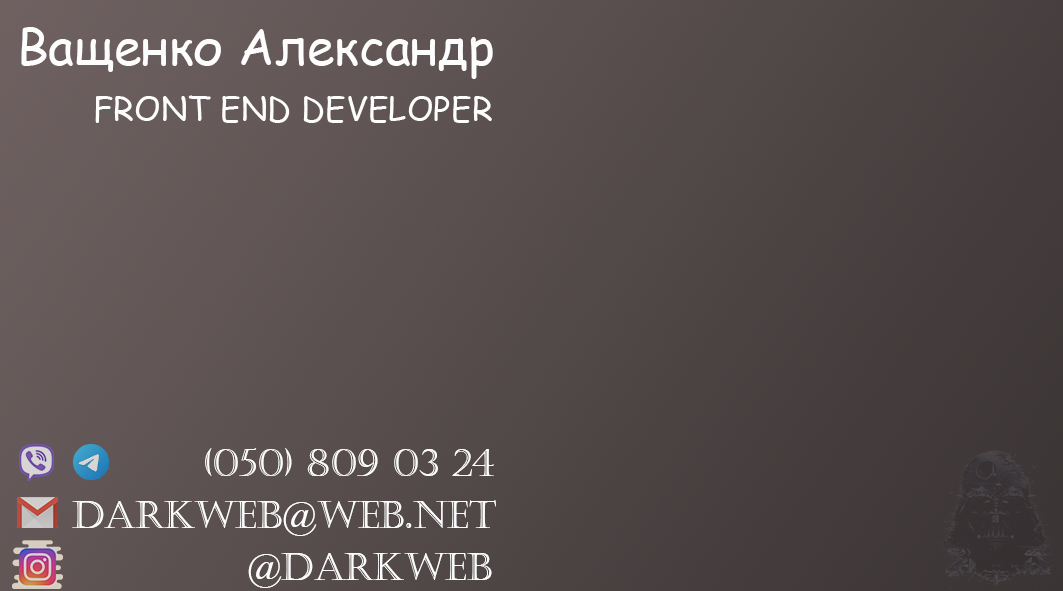
<style>
.page{position:relative;width:1063px;height:591px}
.page>*{position:absolute;margin:0}
.t1{font:50px "ComicSansMS";color:#fdfdfd}
.t2{font:33.3px "ComicSansMS";color:#fdfdfd}
.t3{font:37.5px "Castellar";color:#fdfdfd}
</style>
<div class="page">
<p class="t1" style="left:21px;top:27px;width:472px;height:52px">Ващенко Александр</p>
<p class="t2" style="left:95px;top:95px;width:397px;height:28px">FRONT END DEVELOPER</p>
<p class="t3" style="left:205px;top:448px;width:289px;height:28px">(050) 809 03 24</p>
<p class="t3" style="left:72px;top:500px;width:424px;height:36px">darkweb@web.net</p>
<p class="t3" style="left:248px;top:553px;width:244px;height:35px">@darkweb</p>
</div>
